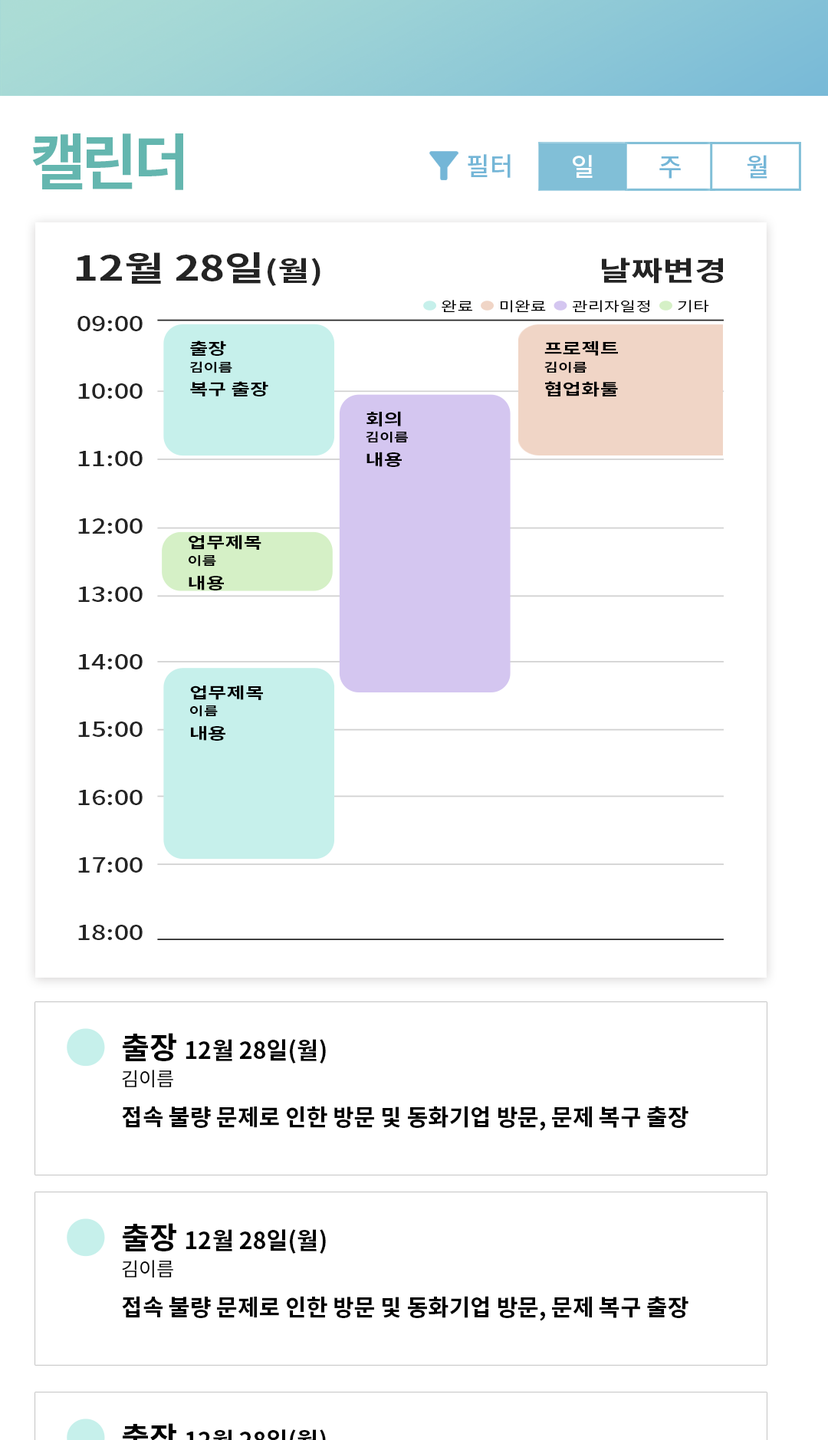
<style>
.page{position:relative;width:828px;height:1440px;background:#ffffff}
.page>*{position:absolute;margin:0}
.t1{font:61.3px "NotoSansCJKkr-Bold";letter-spacing:-0.075em;color:#64b6af}
.t2{font:25.6px "NotoSansCJKkr-Medium";color:#74b6d7}
.t3{font:27.1px "NotoSansCJKkr-Bold";color:#242424;scale:1.28 1}
.t4{font:33.8px "NotoSansCJKkr-Bold";color:#242424;scale:1.28 1}
.t5{font:13.5px "NotoSansCJKkr-Regular";color:#000000;scale:1.29 1}
.t6{font:20.3px/67.7px "NotoSansCJKkr-Medium";color:#242424;scale:1.28 1}
.t7{font:15.8px/20.3px "NotoSansCJKkr-Bold";color:#000000;scale:1.29 1}
.t8{font:12.2px/20.3px "NotoSansCJKkr-Bold";color:#000000;scale:1.29 1}
.t9{font:23px/46px "NotoSansCJKkr-Bold";color:#000000}
.t10{font:30.4px/36.8px "NotoSansCJKkr-Bold";color:#000000}
.t11{font:23.5px/36.8px "NotoSansCJKkr-Bold";color:#000000}
.t12{font:19.2px/36.8px "NotoSansCJKkr-Regular";color:#000000}
</style>
<div class="page">
<p class="t1" style="left:32px;top:133px;width:151px;height:57px">캘린더</p>
<p class="t2" style="left:468px;top:154px;width:43px;height:24px">필터</p>
<p class="t3" style="left:76px;top:252px;width:647px;height:34px"><span class="t4">12월 28일</span>(월)                                   날짜변경</p>
<p class="t5" style="left:442px;top:300px;width:30px;height:12px">완료</p>
<p class="t5" style="left:501px;top:300px;width:45px;height:13px">미완료</p>
<p class="t5" style="left:573px;top:300px;width:76px;height:13px">관리자일정</p>
<p class="t5" style="left:678px;top:300px;width:31px;height:13px">기타</p>
<p class="t6" style="left:77px;top:316px;width:66px;height:624px">09:00<br>10:00<br>11:00<br>12:00<br>13:00<br>14:00<br>15:00<br>16:00<br>17:00<br>18:00</p>
<p class="t7" style="left:190px;top:340px;width:78px;height:56px">출장<br><span class="t8">김이름<br></span>복구 출장</p>
<p class="t7" style="left:544px;top:340px;width:74px;height:57px">프로젝트<br><span class="t8">김이름<br></span>협업화툴</p>
<p class="t8" style="left:366px;top:411px;width:42px;height:56px"><span class="t7">회의<br></span>김이름<br><span class="t7">내용</span></p>
<p class="t7" style="left:189px;top:534px;width:72px;height:56px">업무제목<br><span class="t8">이름<br></span>내용</p>
<p class="t7" style="left:190px;top:685px;width:73px;height:56px">업무제목<br><span class="t8">이름<br></span>내용</p>
<p class="t9" style="left:122px;top:1033px;width:567px;height:98px"><span class="t10">출장 </span><span class="t11">12월 28일(월)<br></span><span class="t12">김이름<br></span>접속 불량 문제로 인한 방문 및 동화기업 방문, 문제 복구 출장</p>
<p class="t9" style="left:122px;top:1223px;width:567px;height:98px"><span class="t10">출장 </span><span class="t11">12월 28일(월)<br></span><span class="t12">김이름<br></span>접속 불량 문제로 인한 방문 및 동화기업 방문, 문제 복구 출장</p>
</div>
